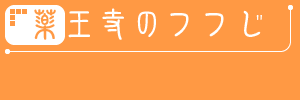
<style>
.page{position:relative;width:300px;height:100px;background:#ff9944}
.page>*{position:absolute;margin:0}
.t1{font:36px "DFShinTen-W7-WIN-RKSJ-H";letter-spacing:-0.05em;color:#ffffff}
.t2{font:36px "DFShinTen-W7-WIN-RKSJ-H";letter-spacing:-0.05em;color:#ff9944}
</style>
<div class="page">
<p class="t1" style="left:34px;top:8px;width:228px;height:32px"><span class="t2">薬</span>王寺のつつじ</p>
</div>
